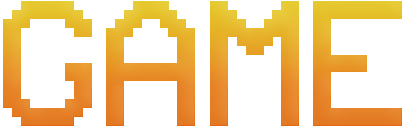
<style>
.page{position:relative;width:408px;height:128px;background:#ffffff}
.page>*{position:absolute;margin:0}
.t1{font:125px "UAV-OSD-Mono";letter-spacing:-0.05em}
</style>
<div class="page">
<p class="t1" style="left:3px;top:1px;width:399px;height:125px">game</p>
</div>
